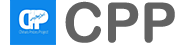
<style>
.page{position:relative;width:183px;height:46px;background:#ffffff}
.page>*{position:absolute;margin:0}
.t1{font:55px "ArialRoundedMTBold";color:#626262}
</style>
<div class="page">
<p class="t1" style="left:65px;top:1px;width:110px;height:42px">CPP</p>
</div>
